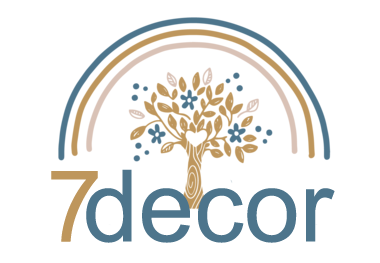
<style>
.page{position:relative;width:380px;height:263px;background:#ffffff}
.page>*{position:absolute;margin:0}
.t1{font:100px "ArialMT";color:#be965c}
.t2{font:100px "ArialMT";color:#4d758c}
</style>
<div class="page">
<p class="t1" style="left:51px;top:171px;width:47px;height:71px">7</p>
<p class="t2" style="left:86px;top:169px;width:249px;height:74px">decor</p>
</div>
